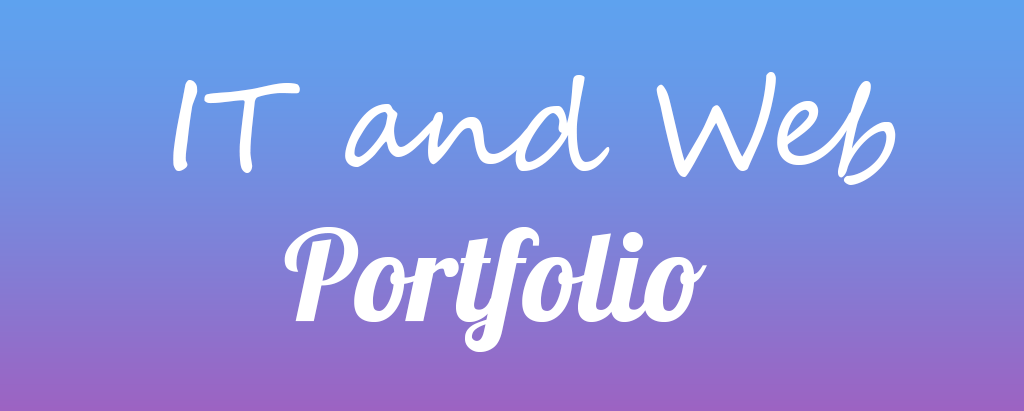
<style>
.page{position:relative;width:1024px;height:411px}
.page>*{position:absolute;margin:0}
.t1{font:125px "SegoeScript";color:#ffffff}
.t2{font:125px "Lobster-Regular";color:#ffffff}
</style>
<div class="page">
<p class="t1" style="left:173px;top:72px;width:723px;height:113px">IT and Web</p>
<p class="t2" style="left:284px;top:227px;width:423px;height:125px">Portfolio</p>
</div>
